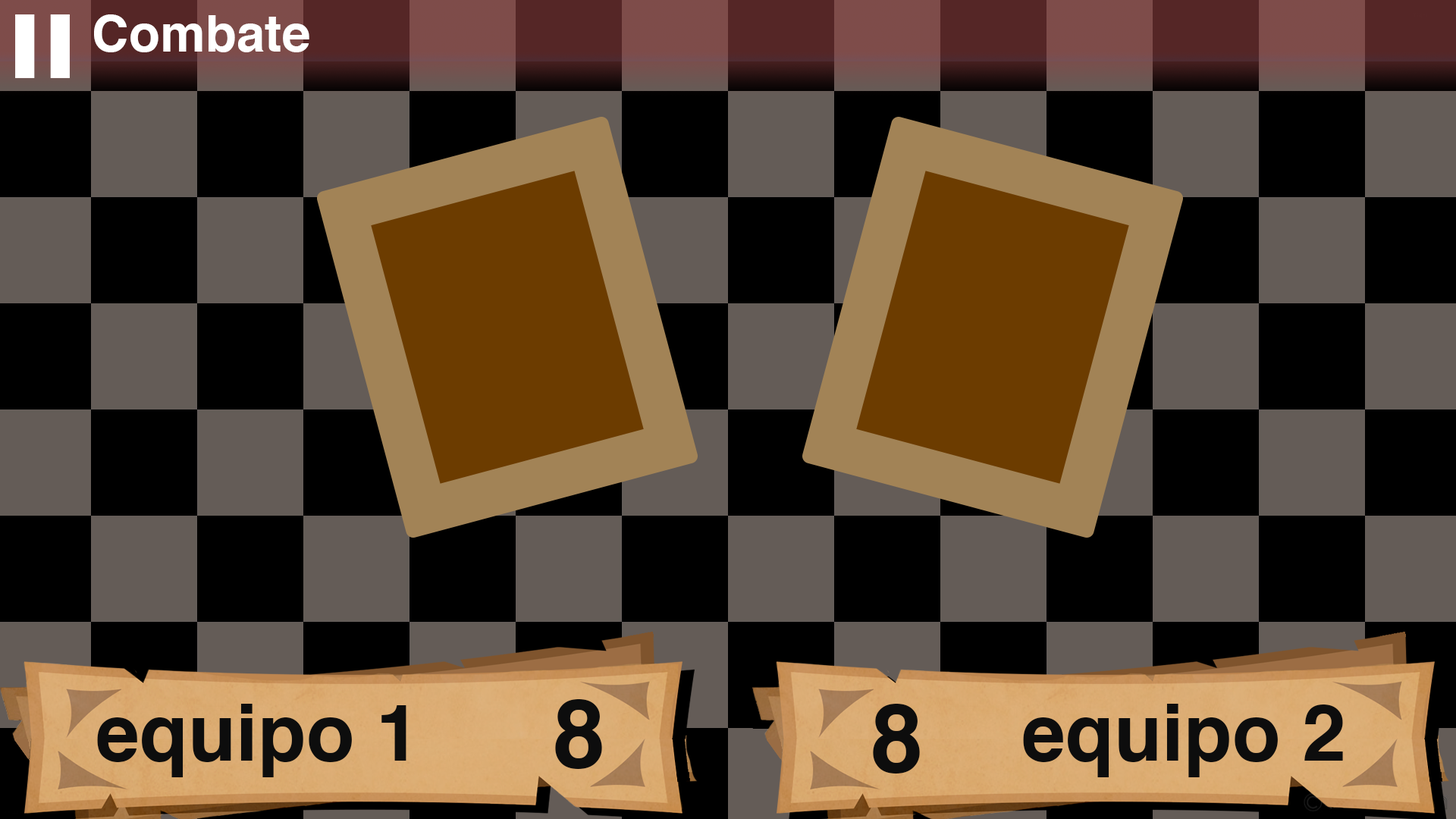
<style>
.page{position:relative;width:1456px;height:819px;background:#000000}
.page>*{position:absolute;margin:0}
.t1{font:51px "Helvetica-Bold";color:#ffffff}
.t2{font:94.8px "Helvetica-Bold";color:#0d0d0d}
.t3{font:79px "Helvetica-Bold";color:#0d0d0d}
</style>
<div class="page">
<p class="t1" style="left:94px;top:14px;width:215px;height:38px">Combate</p>
<p class="t2" style="left:555px;top:699px;width:47px;height:70px">8</p>
<p class="t3" style="left:97px;top:704px;width:309px;height:73px">equipo 1</p>
<p class="t2" style="left:873px;top:704px;width:47px;height:69px">8</p>
<p class="t3" style="left:1023px;top:704px;width:320px;height:73px">equipo 2</p>
</div>
